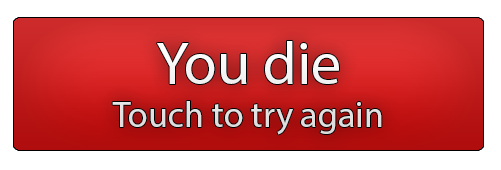
<style>
.page{position:relative;width:501px;height:170px;background:#ffffff}
.page>*{position:absolute;margin:0}
.t1{font:36px "MyriadPro-Regular";color:#f1f1f1}
.t2{font:59.8px "MyriadPro-Regular";color:#f1f1f1}
</style>
<div class="page">
<p class="t1" style="left:112px;top:41px;width:270px;height:94px;text-align:center"><span class="t2">You die<br></span>Touch to try again</p>
</div>
